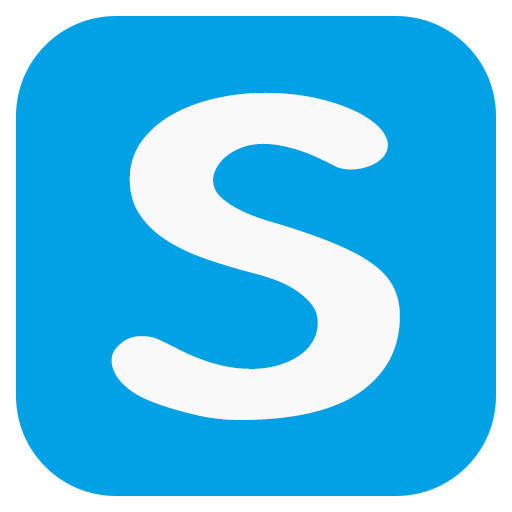
<style>
.page{position:relative;width:512px;height:512px;background:#00a2e6}
.page>*{position:absolute;margin:0}
.t1{font:448.8px "STYuanti-TC-Bold";color:#f8f8f8;scale:1.37 1}
</style>
<div class="page">
<p class="t1" style="left:111px;top:92px;width:289px;height:328px">S</p>
</div>
